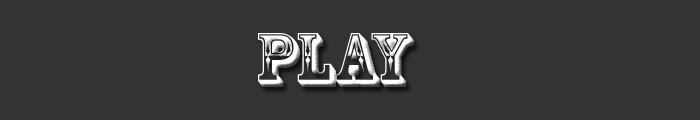
<style>
.page{position:relative;width:700px;height:120px;background:#333333}
.page>*{position:absolute;margin:0}
.t1{font:72px "RosewoodStd-Regular"}
</style>
<div class="page">
<p class="t1" style="left:258px;top:33px;width:156px;height:54px">PLAY</p>
</div>
